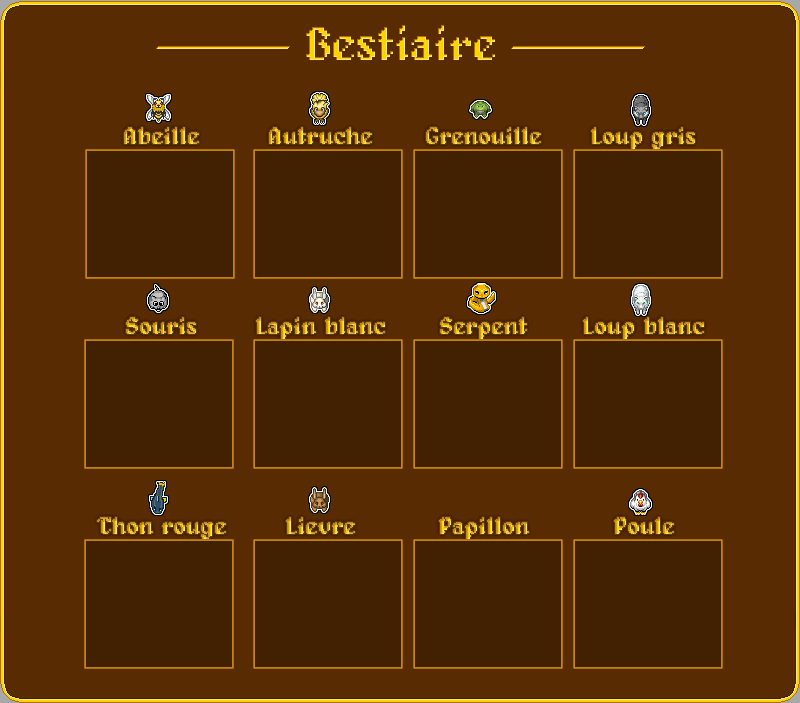
<style>
.page{position:relative;width:800px;height:703px;background:#592b03}
.page>*{position:absolute;margin:0}
.t1{font:24px "Alagard"}
</style>
<div class="page">
<p class="t1" style="left:124px;top:127px;width:75px;height:17px">Abeille</p>
<p class="t1" style="left:269px;top:127px;width:103px;height:17px">Autruche</p>
<p class="t1" style="left:426px;top:127px;width:115px;height:17px">Grenouille</p>
<p class="t1" style="left:591px;top:127px;width:104px;height:22px">Loup gris</p>
<p class="t1" style="left:126px;top:317px;width:70px;height:17px">Souris</p>
<p class="t1" style="left:256px;top:317px;width:129px;height:22px">Lapin blanc</p>
<p class="t1" style="left:440px;top:317px;width:87px;height:22px">Serpent</p>
<p class="t1" style="left:583px;top:317px;width:121px;height:22px">Loup blanc</p>
<p class="t1" style="left:97px;top:517px;width:129px;height:22px">Thon rouge</p>
<p class="t1" style="left:286px;top:517px;width:69px;height:17px">Lievre</p>
<p class="t1" style="left:439px;top:517px;width:90px;height:22px">Papillon</p>
<p class="t1" style="left:614px;top:517px;width:60px;height:17px">Poule</p>
</div>
